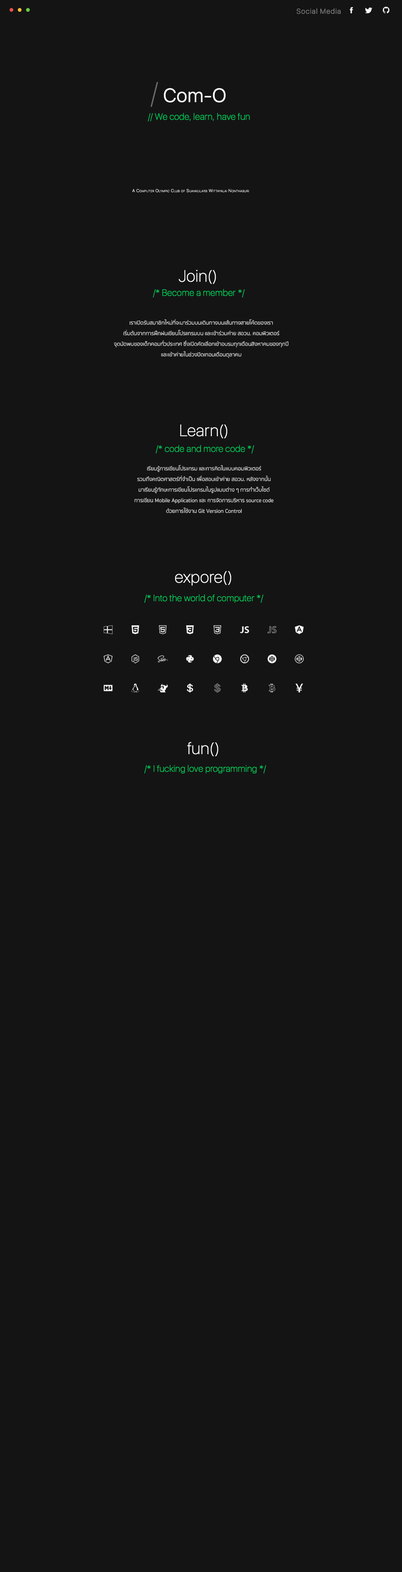
<style>
.page{position:relative;width:402px;height:1572px;background:#141414}
.page>*{position:absolute;margin:0}
.t1{font:59.7px "SFUIDisplay-Ultralight";letter-spacing:-0.1em;color:#e1554e}
.t2{font:59.7px "SFUIDisplay-Ultralight";letter-spacing:-0.1em;color:#f7bd33}
.t3{font:59.7px "SFUIDisplay-Ultralight";letter-spacing:-0.1em;color:#6acd43}
.t4{font:7.1px "SFUIDisplay-Thin";letter-spacing:0.1em;color:#8a8a8a}
.t5{font:19.2px "SFUIDisplay-Light";letter-spacing:0.025em;color:#ffffff}
.t6{font:28.3px "SFUIDisplay-Thin";letter-spacing:0.025em;color:#6d6d6d}
.t7{font:9px "SFUIDisplay-Thin";letter-spacing:0.025em;color:#00c957}
.t8{font:4.2px "SFUIDisplay-Thin";letter-spacing:0.1em;color:#ffffff;font-variant:small-caps}
.t9{font:16.3px "SFUIDisplay-Thin";letter-spacing:0.025em;color:#ffffff}
.t10{font:5.4px/10.6px "SukhumvitSet-Light";color:#cdcdcd}
</style>
<div class="page">
<p class="t1" style="left:9px;top:8px;width:21px;height:4px">.<span class="t2">.</span><span class="t3">.</span></p>
<p class="t4" style="left:297px;top:8px;width:44px;height:6px">Social Media</p>
<p class="t5" style="left:151px;top:82px;width:75px;height:25px"><span class="t6">/ </span>Com-O</p>
<p class="t7" style="left:148px;top:113px;width:102px;height:8px">// We code, learn, have fun</p>
<p class="t8" style="left:132px;top:189px;width:117px;height:4px">A Computer Olympic Club of Suankularb Wittayalai Nonthaburi</p>
<p class="t9" style="left:179px;top:270px;width:37px;height:14px">Join()</p>
<p class="t7" style="left:153px;top:289px;width:92px;height:8px">/* Become a member */</p>
<p class="t10" style="left:114px;top:319px;width:175px;height:39px;text-align:center">เราเปิดรับสมาชิกใหม่ที่จะมาร่วมบนเดินทางบนเส้นทางสายโค้ดของเรา<br>เริ่มต้นจากการฝึกฝนเขียนโปรแกรมบน และเข้าร่วมค่าย สอวน. คอมพิวเตอร์<br>จุดนัดพบของเด็กคอมทั่วประเทศ ซึ่งเปิดคัดเลือกเข้าอบรมทุกเดือนสิงหาคมของทุกปี<br>และเข้าค่ายในช่วงปิดเทอมเดือนตุลาคม</p>
<p class="t9" style="left:180px;top:424px;width:48px;height:15px">Learn()</p>
<p class="t7" style="left:156px;top:445px;width:99px;height:8px">/* code and more code */</p>
<p class="t10" style="left:134px;top:465px;width:140px;height:48px;text-align:center">เรียนรู้การเขียนโปรแกรม และการคิดในแบบคอมพิวเตอร์<br>รวมถึงคณิตศาสตร์ที่จำเป็น เพื่อสอบเข้าค่าย สอวน. หลังจากนั้น<br>มาเรียนรู้ทักษะการเขียนโปรแกรมในรูปแบบต่าง ๆ การทำเว็บไซต์<br>การเขียน Mobile Application และ การจัดการบริหาร source code<br>ด้วยการใช้งาน Git Version Control</p>
<p class="t9" style="left:175px;top:571px;width:56px;height:15px">expore()</p>
<p class="t7" style="left:144px;top:594px;width:120px;height:9px">/* Into the world of computer */</p>
<p class="t9" style="left:187px;top:742px;width:31px;height:14px">fun()</p>
<p class="t7" style="left:144px;top:765px;width:122px;height:8px">/* I fucking love programming */</p>
</div>
